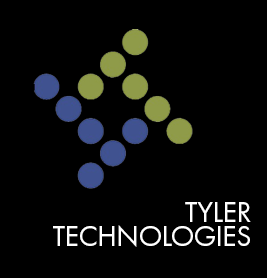
<style>
.page{position:relative;width:267px;height:278px;background:#000000}
.page>*{position:absolute;margin:0}
.t1{font:30px/24px "FuturaPT-Book";letter-spacing:-0.025em;color:#ffffff;text-transform:uppercase}
.t2{font:30px/24px "FuturaPT-Heavy";letter-spacing:-0.025em;color:#ffffff;text-transform:uppercase}
</style>
<div class="page">
<p class="t1" style="left:53px;top:202px;width:198px;height:45px;text-align:right"><span class="t2"> </span>tyler<br>technologies</p>
</div>
